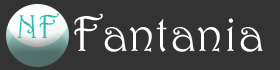
<style>
.page{position:relative;width:280px;height:70px;background:#333333}
.page>*{position:absolute;margin:0}
.t1{font:33.3px "Harrington";color:#2bbbad}
.t2{font:50px "Harrington";color:#ffffff}
</style>
<div class="page">
<p class="t1" style="left:17px;top:13px;width:42px;height:25px">NF</p>
<p class="t2" style="left:74px;top:13px;width:189px;height:39px">Fantania</p>
</div>
